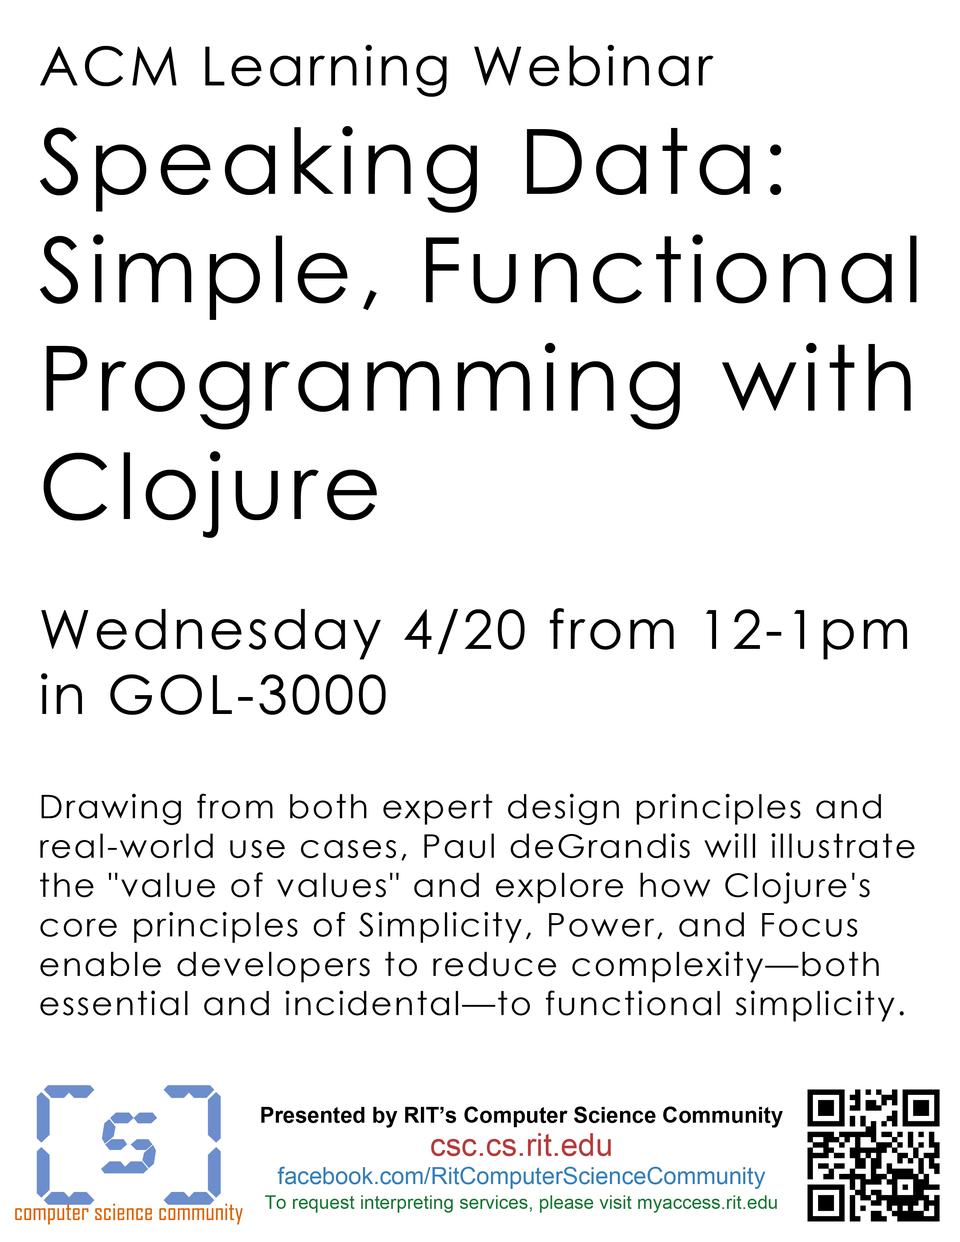
<style>
.page{position:relative;width:960px;height:1242px;background:#ffffff}
.page>*{position:absolute;margin:0}
.t1{font:32.8px "CenturyGothic";letter-spacing:0.06em;color:#000000}
.t2{font:54.1px/0px "CenturyGothic";letter-spacing:0.06em;color:#000000}
.t3{font:90.3px/0px "CenturyGothic";letter-spacing:0.06em;color:#000000}
.t4{font:90.3px "CenturyGothic";letter-spacing:0.06em;color:#000000}
.t5{font:54.1px "CenturyGothic";letter-spacing:0.06em;color:#000000}
.t6{font:18.8px/25.1px "ArialMT";color:#197734}
.t7{font:22px "Arial-BoldMT";color:#000000}
.t8{font:22px/32.9px "Arial-BoldMT";color:#000000}
.t9{font:31.4px/32.9px "ArialMT";color:#b73b3b}
.t10{font:23.5px "ArialMT";color:#357fb8}
.t11{font:23.5px/18.8px "ArialMT";color:#357fb8}
.t12{font:23.5px/25.1px "ArialMT";color:#357fb8}
</style>
<div class="page">
<p class="t1" style="left:40px;top:45px;width:877px;height:977px"><span class="t2">ACM Learning Webinar<br></span><span class="t3">Speaking Data:</span><span class="t4"> Simple, Functional Programming with Clojure<br></span><span class="t5"><br>Wednesday 4/20 from 12-1pm<br>in GOL-3000<br><br></span>Drawing from both expert design principles and real-world use cases, Paul deGrandis will illustrate the "value of values" and explore how Clojure's core principles of Simplicity, Power, and Focus enable developers to reduce complexity—both essential and incidental—to functional simplicity.</p>
<p class="t6" style="left:261px;top:1107px;width:522px;height:106px;text-align:center"><span class="t7">Presented by RIT’s Co</span><span class="t8">mputer Science Community<br></span><span class="t9">csc.cs.rit.edu<br></span><span class="t10">facebook.com/RitComputerScienceCommun</span><span class="t11">it</span><span class="t12">y<br></span>To request interpreting services, please visit myaccess.rit.edu</p>
</div>
